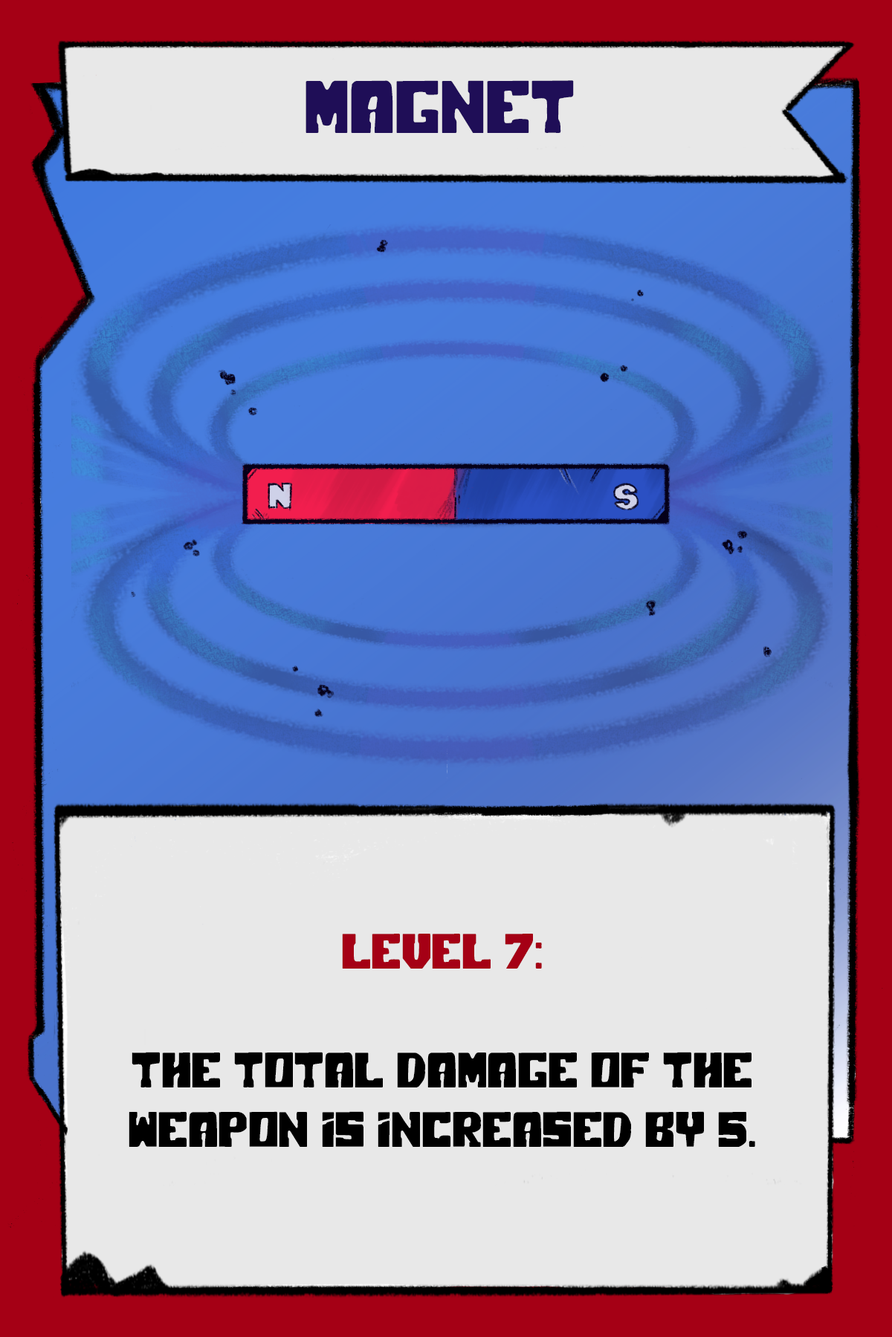
<style>
.page{position:relative;width:892px;height:1337px;background:#e8e8e8}
.page>*{position:absolute;margin:0}
.t1{font:74.3px "PolarPress";color:#1f0e57}
.t2{font:49.5px "PolarPress";color:#000000}
.t3{font:49.5px "PolarPress";color:#a50015}
.t4{font:49.5px "MyriadPro-Regular";color:#000000}
</style>
<div class="page">
<p class="t1" style="left:305px;top:80px;width:269px;height:53px">MAGNET</p>
<p class="t2" style="left:129px;top:934px;width:626px;height:213px;text-align:center"><span class="t3">LEVEL 7:<br><br></span>The total damage of the weapon is increased by 5.<br><span class="t4"><br></span></p>
</div>
